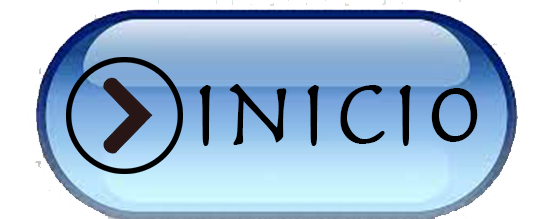
<style>
.page{position:relative;width:552px;height:219px;background:#ffffff}
.page>*{position:absolute;margin:0}
.t1{font:100px "Herculanum";color:#000000}
</style>
<div class="page">
<p class="t1" style="left:199px;top:84px;width:279px;height:62px">Inicio</p>
</div>
